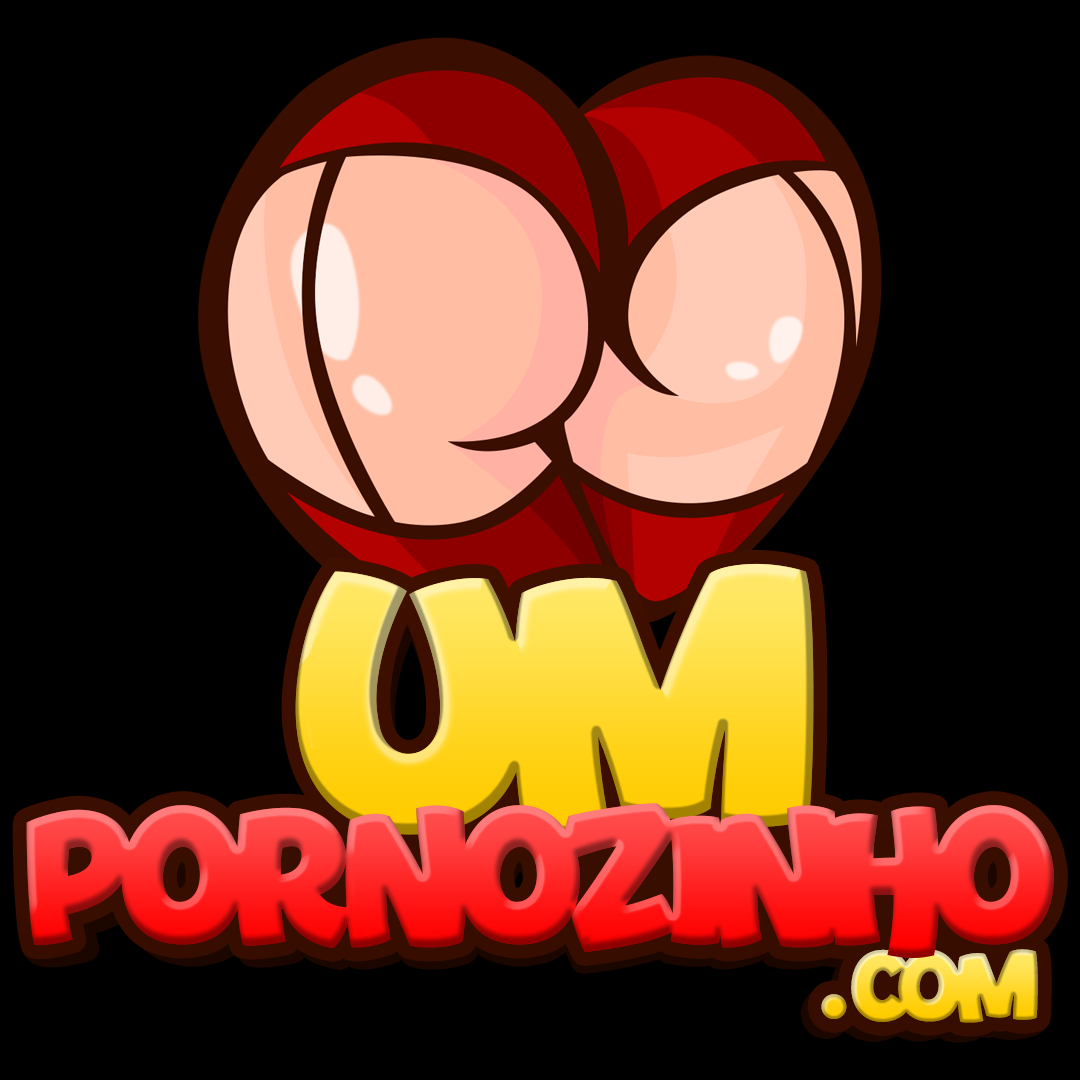
<style>
.page{position:relative;width:1080px;height:1080px;background:#000000}
.page>*{position:absolute;margin:0}
.t1{font:317.5px "Bouncy-BlackPERSONALUSEONLY"}
.t2{font:165px "Bouncy-BlackPERSONALUSEONLY"}
.t3{font:85.2px "Bouncy-BlackPERSONALUSEONLY"}
</style>
<div class="page">
<p class="t1" style="left:295px;top:563px;width:519px;height:274px">UM</p>
<p class="t2" style="left:26px;top:803px;width:1028px;height:155px">PORNOZINHO</p>
<p class="t3" style="left:821px;top:949px;width:217px;height:74px">.COM</p>
</div>
